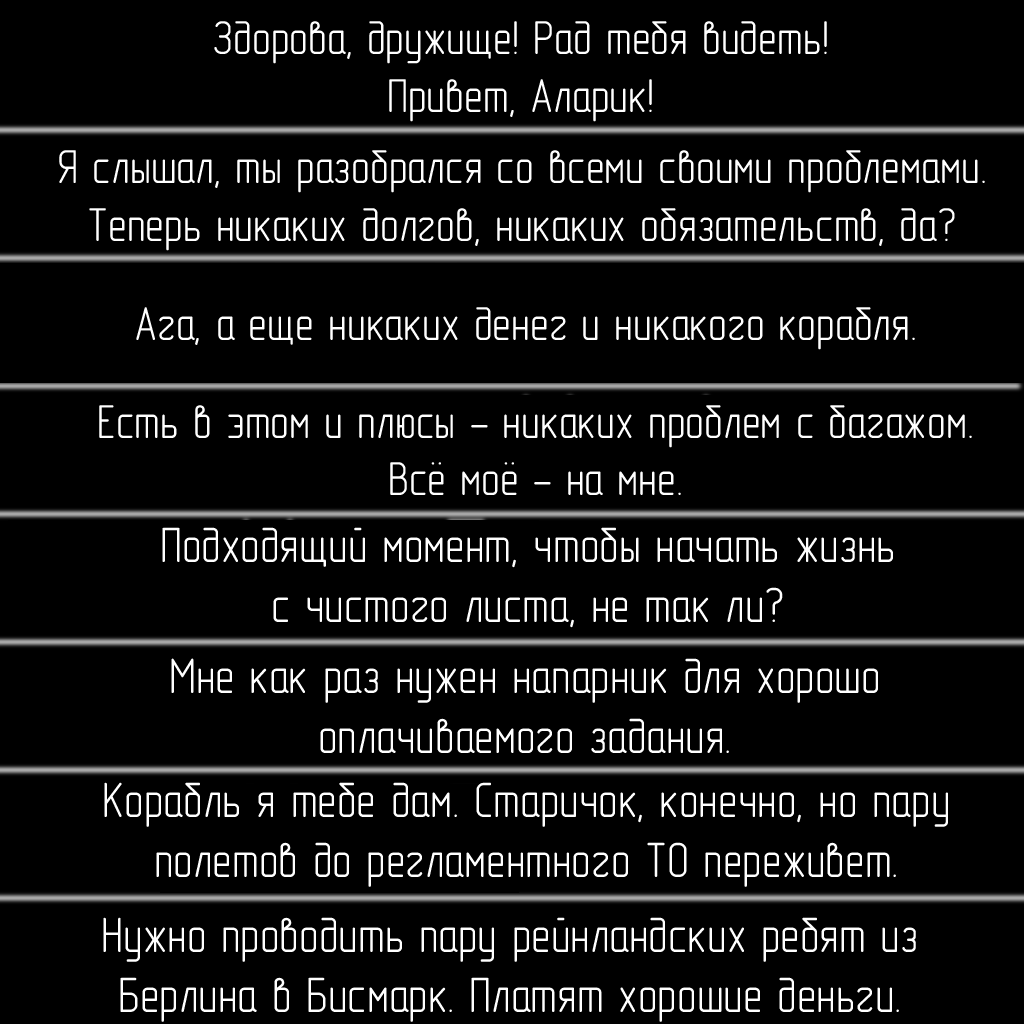
<style>
.page{position:relative;width:1024px;height:1024px;background:#000000}
.page>*{position:absolute;margin:0}
.t1{font:48px "GOST-2.304-81typeA";color:#ffffff}
.t2{font:50px "GOST-2.304-81typeA";color:#ffffff}
</style>
<div class="page">
<p class="t1" style="left:214px;top:21px;width:613px;height:101px;text-align:center">Здорова, дружище! Рад тебя видеть!<br>Привет, Аларик!</p>
<p class="t1" style="left:59px;top:150px;width:926px;height:101px;text-align:center">Я слышал, ты разобрался со всеми своими проблемами.<br>Теперь никаких долгов, никаких обязательств, да?</p>
<p class="t1" style="left:136px;top:307px;width:779px;height:43px">Ага, а еще никаких денег и никакого корабля.</p>
<p class="t1" style="left:99px;top:405px;width:873px;height:90px;text-align:center">Есть в этом и плюсы - никаких проблем с багажом.<br>Всё моё - на мне.</p>
<p class="t2" style="left:162px;top:527px;width:731px;height:101px;text-align:center">Подходящий момент, чтобы начать жизнь<br>с чистого листа, не так ли?</p>
<p class="t2" style="left:171px;top:658px;width:707px;height:95px;text-align:center">Мне как раз нужен напарник для хорошо<br>оплачиваемого задания.</p>
<p class="t2" style="left:104px;top:782px;width:844px;height:105px;text-align:center">Корабль я тебе дам. Старичок, конечно, но пару<br>полетов до регламентного ТО переживет.</p>
<p class="t2" style="left:103px;top:917px;width:813px;height:105px;text-align:center">Нужно проводить пару рейнландских ребят из<br>Берлина в Бисмарк. Платят хорошие деньги.</p>
</div>
